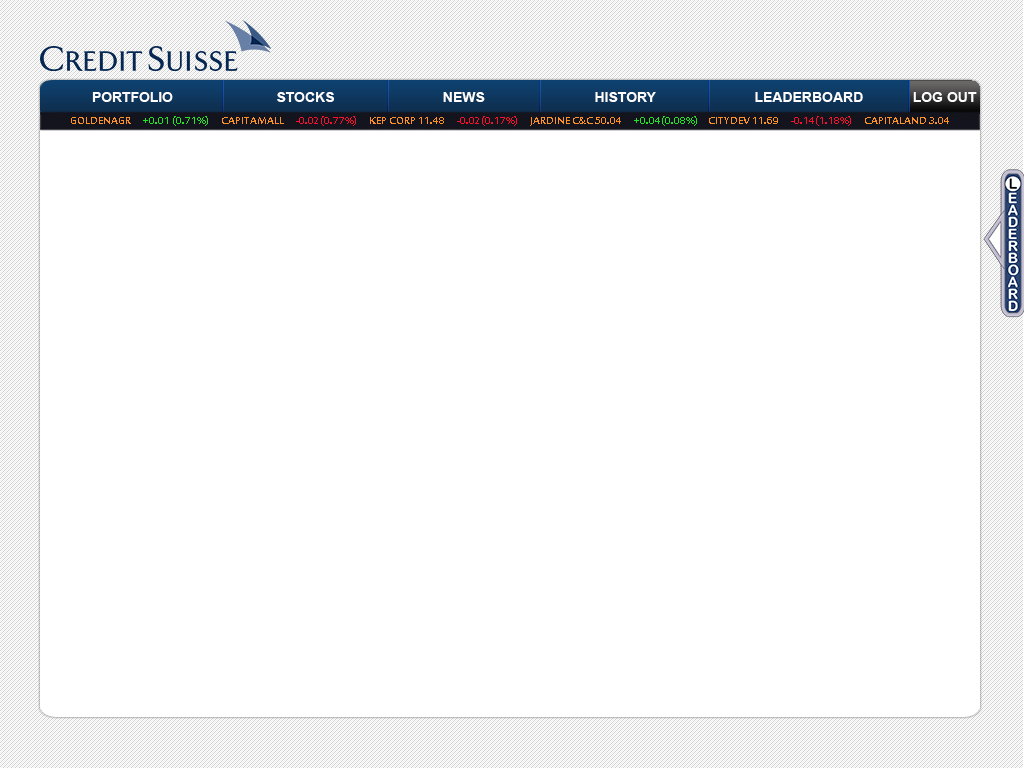
<style>
.page{position:relative;width:1024px;height:768px;background:#ffffff}
.page>*{position:absolute;margin:0}
.t1{font:14px "Arial-BoldMT";color:#fefcfc}
.t2{font:14px "Arial-BoldMT";color:#fbfcfd}
.t3{font:14px "SakkalMajallaBold";color:#fe9226}
.t4{font:14px "SakkalMajallaBold";color:#24e428}
.t5{font:14px "SakkalMajallaBold";color:#fd0e2a}
</style>
<div class="page">
<p class="t1" style="left:92px;top:92px;width:81px;height:10px">PORTFOLIO</p>
<p class="t1" style="left:277px;top:92px;width:57px;height:10px">STOCKS</p>
<p class="t1" style="left:443px;top:92px;width:42px;height:10px">NEWS</p>
<p class="t1" style="left:595px;top:92px;width:61px;height:10px">HISTORY</p>
<p class="t1" style="left:755px;top:92px;width:108px;height:10px">LEADERBOARD</p>
<p class="t2" style="left:913px;top:92px;width:64px;height:10px">LOG OUT</p>
<p class="t3" style="left:71px;top:116px;width:878px;height:10px">GOLDENAGR      <span class="t4">+0.01 (0.71%)</span>      CAPITAMALL      <span class="t5">-0.02(0.77%) </span>     KEP CORP 11.48      <span class="t5">-0.02(0.17%)</span>      JARDINE C&amp;C 50.04      <span class="t4">+0.04(0.08%)</span>     CITYDEV 11.69      <span class="t5">-0.14(1.18%)</span>      CAPITALAND 3.04     <span class="t4">+0.02(0.66%</span></p>
</div>
